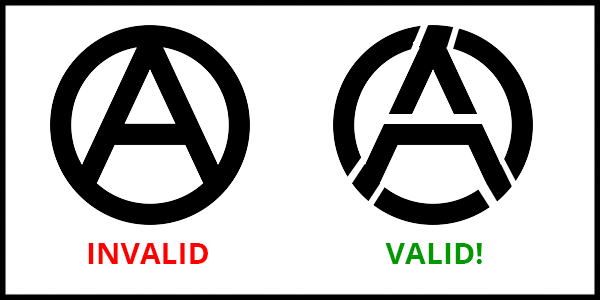
<style>
.page{position:relative;width:600px;height:300px;background:#ffffff}
.page>*{position:absolute;margin:0}
.t1{font:30px "OpenSans-Bold";color:#ff0000}
.t2{font:30px "OpenSans-Bold";color:#009900}
</style>
<div class="page">
<p class="t1" style="left:88px;top:243px;width:120px;height:21px">INVALID</p>
<p class="t2" style="left:385px;top:243px;width:97px;height:21px">VALID!</p>
</div>
